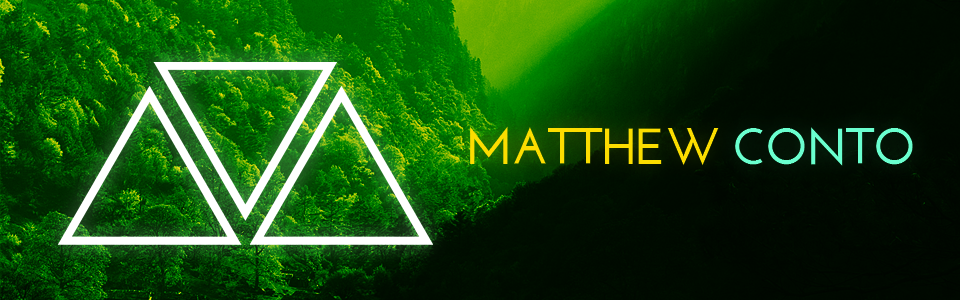
<style>
.page{position:relative;width:960px;height:300px}
.page>*{position:absolute;margin:0}
.t1{font:50.6px "JosefinSans-Bold";letter-spacing:-0.023em;color:#fcdd00;text-transform:uppercase}
.t2{font:50.6px "JosefinSans-Bold";letter-spacing:-0.023em;color:#6affcf;text-transform:uppercase}
</style>
<div class="page">
<p class="t1" style="left:470px;top:126px;width:249px;height:40px">Matthew</p>
<p class="t2" style="left:735px;top:127px;width:178px;height:39px">CONTO</p>
</div>
